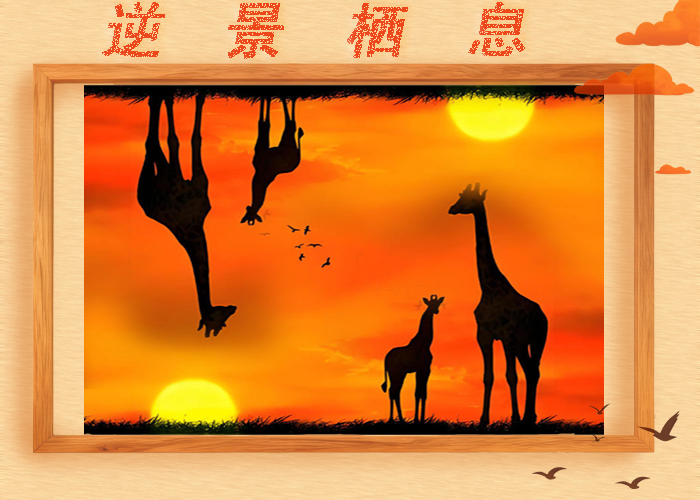
<style>
.page{position:relative;width:700px;height:500px}
.page>*{position:absolute;margin:0}
.t1{font:60px "SimHei";letter-spacing:1em;color:#ed471d;font-weight:bold;font-style:italic}
</style>
<div class="page">
<p class="t1" style="left:102px;top:2px;width:423px;height:57px;opacity:0.8">逆景栖息</p>
</div>
